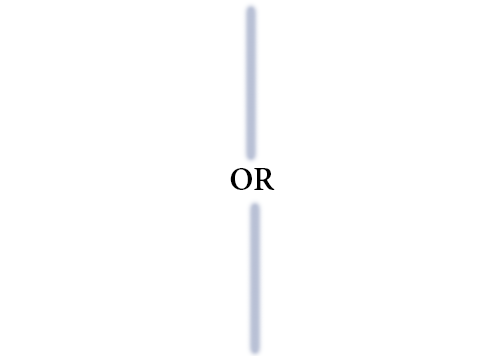
<style>
.page{position:relative;width:504px;height:360px;background:#ffffff}
.page>*{position:absolute;margin:0}
.t1{font:35.6px "AdobeGurmukhi-Bold";color:#000000}
</style>
<div class="page">
<p class="t1" style="left:230px;top:168px;width:45px;height:22px">OR</p>
</div>
